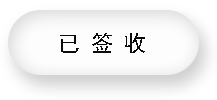
<style>
.page{position:relative;width:217px;height:100px}
.page>*{position:absolute;margin:0}
.t1{font:22px "SimHei";color:#0c0b0b}
</style>
<div class="page">
<p class="t1" style="left:60px;top:33px;width:85px;height:20px">已 签 收</p>
</div>
